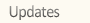
<style>
.page{position:relative;width:90px;height:23px;background:#fdfaf2}
.page>*{position:absolute;margin:0}
.t1{font:17.3px "Calibri";letter-spacing:-0.04em;scale:0.94 1}
</style>
<div class="page">
<p class="t1" style="left:9px;top:5px;width:51px;height:15px">Updates</p>
</div>
